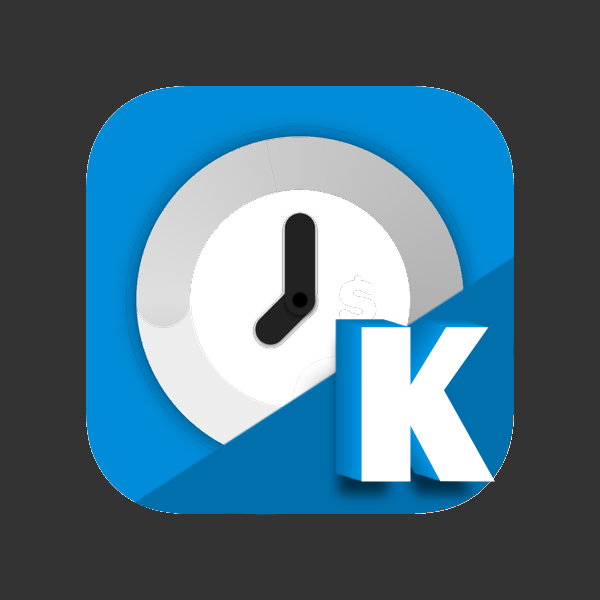
<style>
.page{position:relative;width:600px;height:600px;background:#333333}
.page>*{position:absolute;margin:0}
.t1{font:216px "ArmWrestler-Bold";color:#ffffff;font-weight:bold}
</style>
<div class="page">
<p class="t1" style="left:361px;top:327px;width:134px;height:155px">K</p>
</div>
